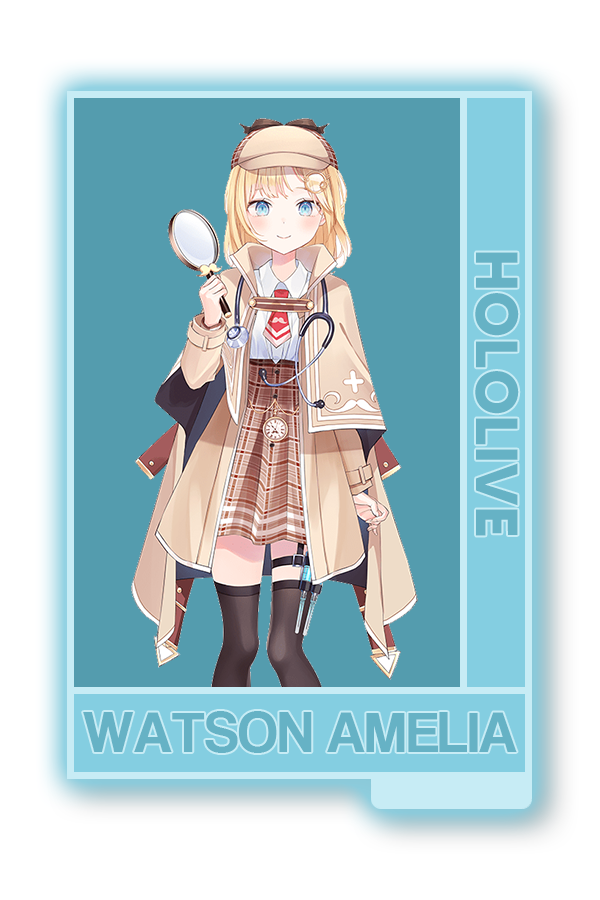
<style>
.page{position:relative;width:600px;height:900px;background:#549cae}
.page>*{position:absolute;margin:0}
.t1{font:59.2px "MADETOMMY-Bold";color:#66b2c5}
.t2{font:59.4px "CoolveticaRg-Regular";color:#66b2c5}
</style>
<div class="page">
<p class="t1" style="left:475px;top:252px;width:44px;height:284px;rotate:90deg">HOLOLIVE</p>
<p class="t2" style="left:83px;top:711px;width:434px;height:42px">WATSON AMELIA</p>
</div>
